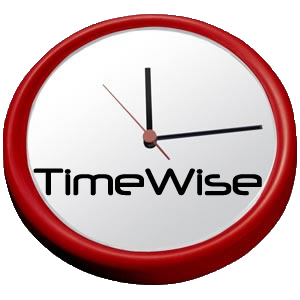
<style>
.page{position:relative;width:300px;height:300px;background:#ffffff}
.page>*{position:absolute;margin:0}
.t1{font:44.3px "Neuropol";color:#000000}
</style>
<div class="page">
<p class="t1" style="left:33px;top:168px;width:229px;height:28px">TimeWise</p>
</div>
